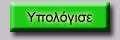
<style>
.page{position:relative;width:120px;height:40px}
.page>*{position:absolute;margin:0}
.t1{font:14px "ArialMT";color:#000000}
</style>
<div class="page">
<p class="t1" style="left:27px;top:11px;width:65px;height:14px">Υπολόγισε</p>
</div>
